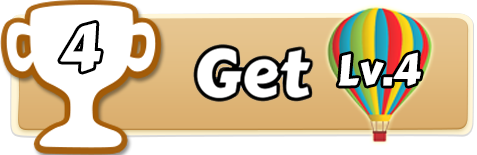
<style>
.page{position:relative;width:477px;height:155px;background:#ffffff}
.page>*{position:absolute;margin:0}
.t1{font:62.2px "CarterOne";color:#ffffff}
.t2{font:42.3px "CarterOne";color:#ffffff}
</style>
<div class="page">
<p class="t1" style="left:60px;top:23px;width:41px;height:49px">4</p>
<p class="t2" style="left:338px;top:52px;width:83px;height:34px">Lv.4</p>
</div>
